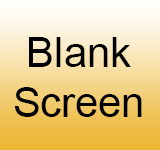
<style>
.page{position:relative;width:160px;height:150px}
.page>*{position:absolute;margin:0}
.t1{font:41.7px "ArialMT";color:#010101}
</style>
<div class="page">
<p class="t1" style="left:14px;top:37px;width:128px;height:80px;text-align:center">Blank<br>Screen</p>
</div>
